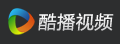
<style>
.page{position:relative;width:120px;height:44px;background:#2d2e2f}
.page>*{position:absolute;margin:0}
.t1{font:18px "MicrosoftYaHei";letter-spacing:0.05em;color:#e5e5e5}
</style>
<div class="page">
<p class="t1" style="left:38px;top:13px;width:76px;height:18px">酷播视频</p>
</div>
